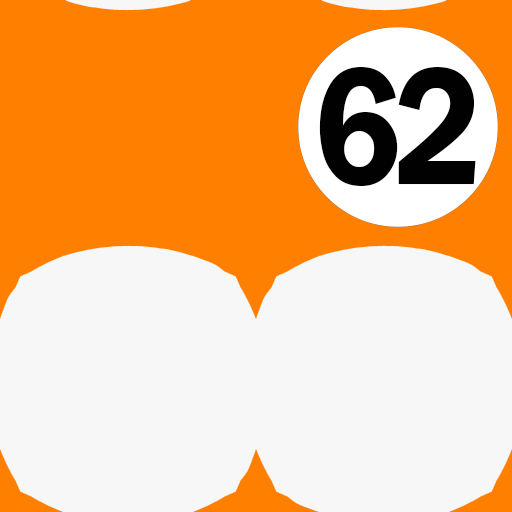
<style>
.page{position:relative;width:512px;height:512px;background:#f7f7f7}
.page>*{position:absolute;margin:0}
.t1{font:172.5px "FranklinGothic-Demi";letter-spacing:-0.05em;color:#010101;scale:0.87 1}
</style>
<div class="page">
<p class="t1" style="left:319px;top:67px;width:157px;height:119px">62</p>
</div>
